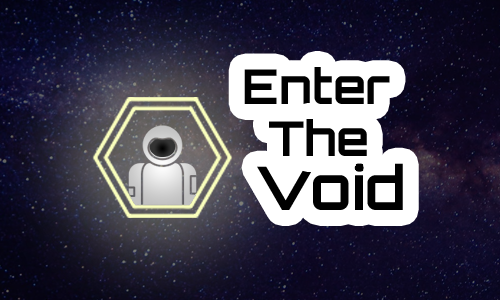
<style>
.page{position:relative;width:500px;height:300px}
.page>*{position:absolute;margin:0}
.t1{font:48px "Orbitron-Bold";color:#000000}
.t2{font:60px "Orbitron-Bold";color:#000000}
</style>
<div class="page">
<p class="t1" style="left:244px;top:67px;width:146px;height:37px">Enter</p>
<p class="t1" style="left:269px;top:119px;width:98px;height:37px">The</p>
<p class="t2" style="left:257px;top:163px;width:146px;height:47px">Void</p>
</div>
